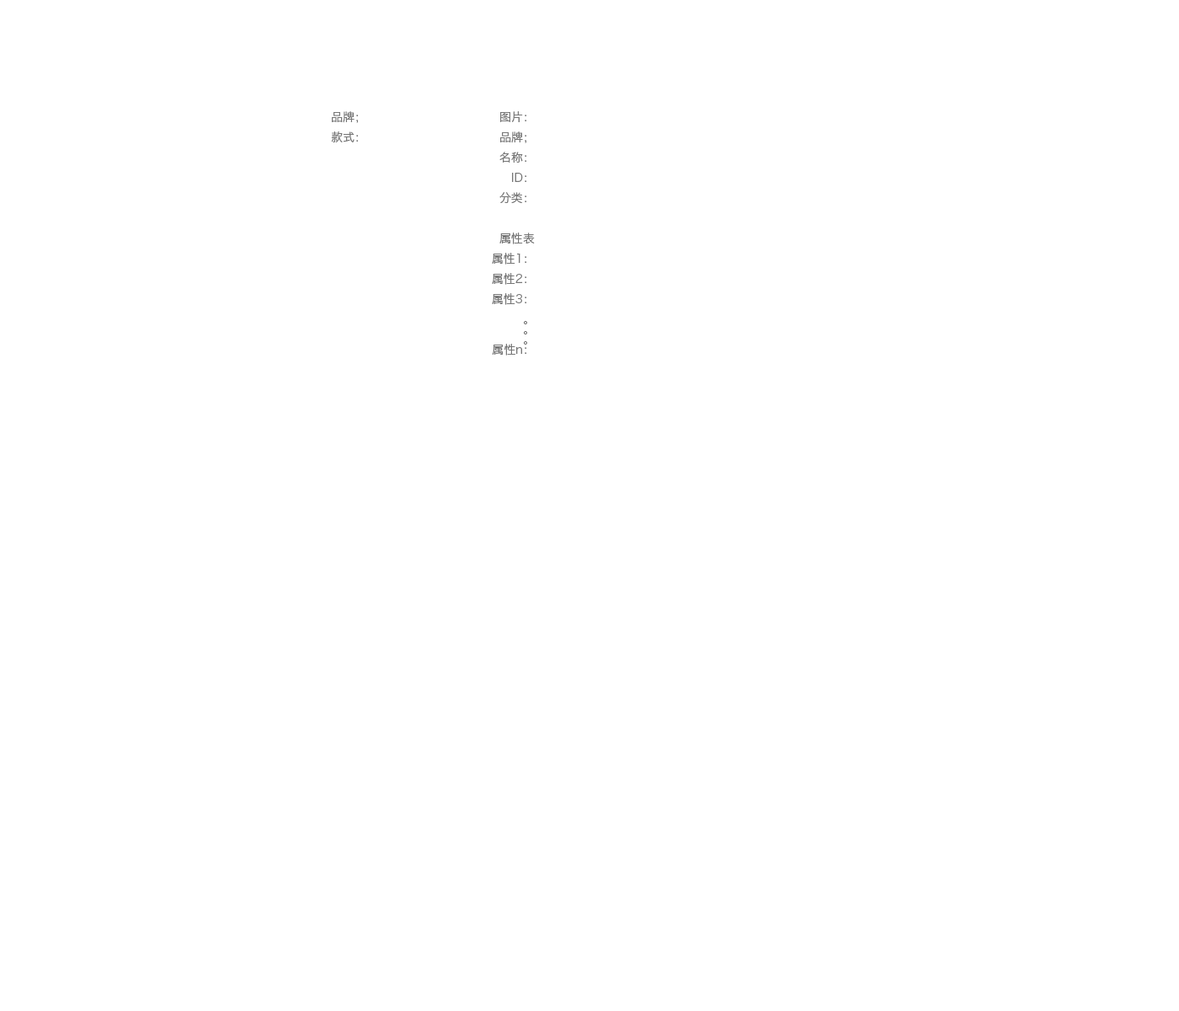
<style>
.page{position:relative;width:1179px;height:1011px;background:#ffffff}
.page>*{position:absolute;margin:0}
.t1{font:11.8px/20.2px "HiraginoSansGB-W3";color:#777777}
.t2{font:11.8px/10.1px "HiraginoSansGB-W3";color:#777777}
</style>
<div class="page">
<p class="t1" style="left:331px;top:111px;width:27px;height:31px;text-align:right">品牌；<br>款式：</p>
<p class="t1" style="left:492px;top:111px;width:43px;height:245px;text-align:right">图片：<br>品牌；<br>名称：<br>ID：<br>分类：<br><br>属性表<br>属性1：<br>属性2：<br>属性3：<br><span class="t2">  。<br>。<br>。<br></span>属性n：</p>
</div>
